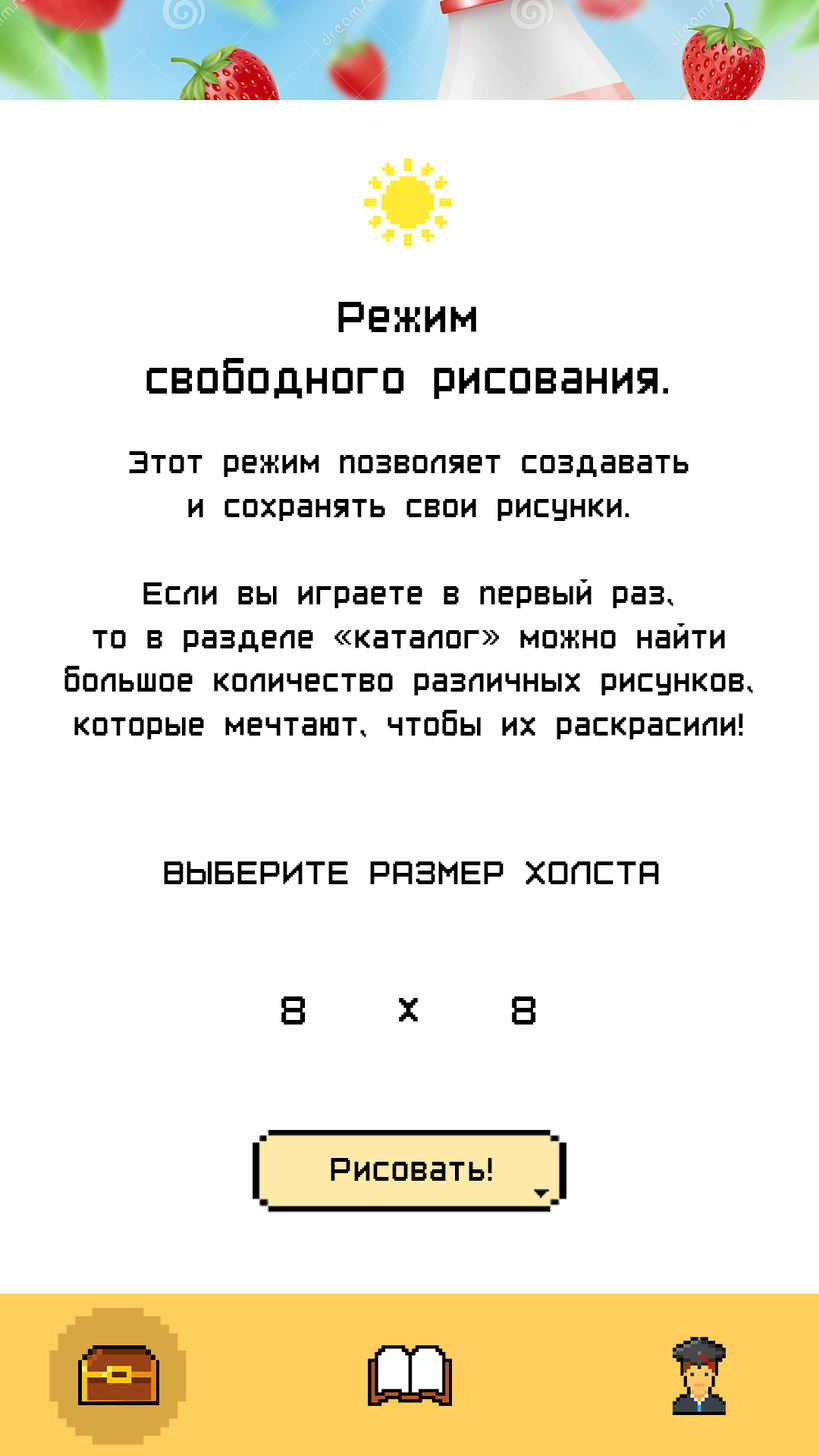
<style>
.page{position:relative;width:819px;height:1456px;background:#ffffff}
.page>*{position:absolute;margin:0}
.t1{font:50.9px "PixelFont-7";color:#000000}
.t2{font:36.4px "PixelFont-7";color:#000000}
.t3{font:37.9px "PixelFont-7";color:#000000;text-transform:uppercase}
.t4{font:47.2px "PixelFont-7";color:#000000}
.t5{font:38.2px "PixelFont-7";color:#000000}
</style>
<div class="page">
<p class="t1" style="left:146px;top:302px;width:522px;height:97px;text-align:center">Режим<br>свободного рисования.</p>
<p class="t2" style="left:64px;top:451px;width:689px;height:288px;text-align:center">Этот режим позволяет создавать<br>и сохранять свои рисунки.<br><br>Если вы играете в первый раз,<br>то в разделе «каталог» можно найти<br>большое количество различных рисунков,<br>которые мечтают, чтобы их раскрасили!</p>
<p class="t3" style="left:164px;top:861px;width:495px;height:23px">ВЫБЕРИТЕ размер холста</p>
<p class="t4" style="left:281px;top:996px;width:25px;height:28px">8</p>
<p class="t4" style="left:399px;top:998px;width:19px;height:23px">x</p>
<p class="t4" style="left:512px;top:996px;width:24px;height:28px">8</p>
<p class="t5" style="left:331px;top:1158px;width:161px;height:23px">Рисовать!</p>
</div>
